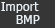
<style>
.page{position:relative;width:55px;height:28px;background:#363636}
.page>*{position:absolute;margin:0}
.t1{font:12.5px "Tahoma";color:#e9f0f5}
</style>
<div class="page">
<p class="t1" style="left:1px;top:2px;width:38px;height:11px">Import</p>
<p class="t1" style="left:16px;top:15px;width:24px;height:9px">BMP</p>
</div>
